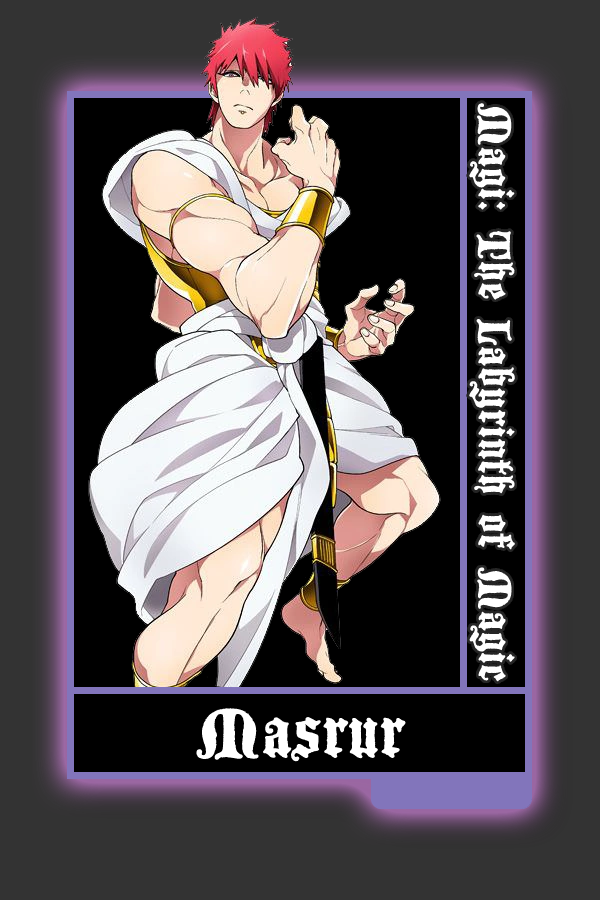
<style>
.page{position:relative;width:600px;height:900px;background:#000000}
.page>*{position:absolute;margin:0}
.t1{font:50px "BlackwoodCastle";color:#ffffff}
.t2{font:75px "BlackwoodCastle";color:#ffffff}
</style>
<div class="page">
<p class="t1" style="left:469px;top:103px;width:46px;height:579px;rotate:90deg">Magi: The Labyrinth of Magic</p>
<p class="t2" style="left:196px;top:708px;width:210px;height:54px">Masrur</p>
</div>
